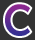
<style>
.page{position:relative;width:35px;height:40px;background:#333333}
.page>*{position:absolute;margin:0}
.t1{font:50px "BerlinSansFBDemi-Bold";letter-spacing:0.2em}
</style>
<div class="page">
<p class="t1" style="left:3px;top:2px;width:30px;height:36px">C</p>
</div>
